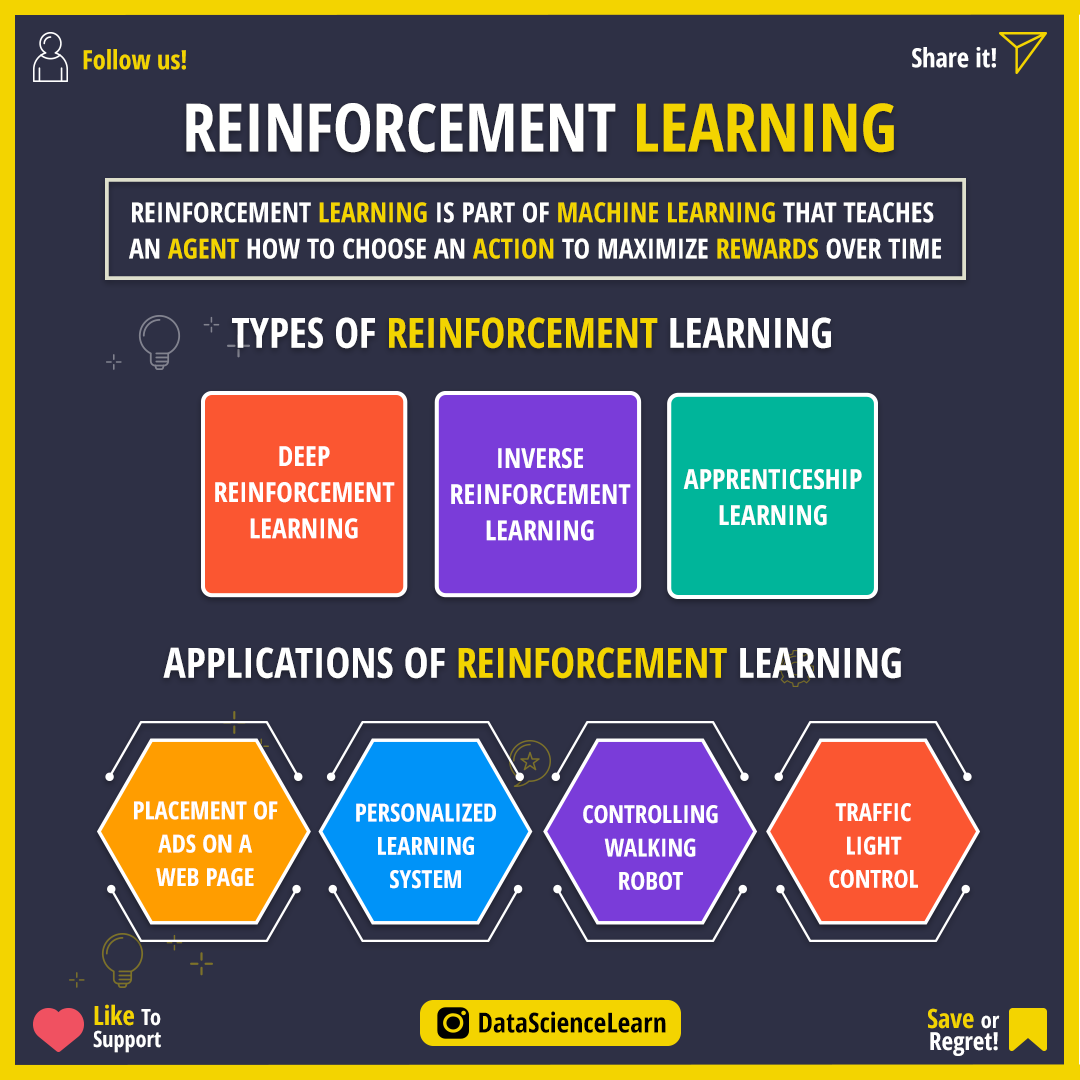
<style>
.page{position:relative;width:1080px;height:1080px;background:#2e3045}
.page>*{position:absolute;margin:0}
.t1{font:26.4px "OpenSans-CondensedBold";color:#f3d400}
.t2{font:26.4px "OpenSans-CondensedBold";color:#ffffff}
.t3{font:66.7px "OpenSans-CondensedBold";color:#fffffe}
.t4{font:66.7px "OpenSans-CondensedBold";color:#f3d400}
.t5{font:27.8px/36.1px "OpenSans-CondensedBold";color:#f3d400}
.t6{font:27.8px/36.1px "OpenSans-CondensedBold";color:#ffffff}
.t7{font:41.7px "OpenSans-CondensedBold";color:#f3d400}
.t8{font:41.7px "OpenSans-CondensedBold";color:#ffffff}
.t9{font:25px/33.3px "OpenSans-CondensedBold";color:#ffffff}
.t10{font:22.2px/22.2px "OpenSans-CondensedBold";color:#ffffff}
.t11{font:26.4px/22.2px "OpenSans-CondensedBold";color:#f3d400}
.t12{font:27.8px "OpenSans-CondensedBold";color:#000000}
.t13{font:25px/22.2px "OpenSans-CondensedBold";color:#ffffff}
</style>
<div class="page">
<p class="t1" style="left:83px;top:49px;width:103px;height:21px">Follow us!</p>
<p class="t2" style="left:912px;top:47px;width:84px;height:21px">Share it!</p>
<p class="t3" style="left:186px;top:103px;width:708px;height:50px">REINFORCEMENT <span class="t4">LEARNING</span></p>
<p class="t5" style="left:129px;top:202px;width:812px;height:57px;text-align:center"><span class="t6">REINFORCEMENT </span>LEARNING <span class="t6">IS PART OF </span>MACHINE LEARNING<span class="t6"> THAT TEACHES <br>AN </span>AGENT <span class="t6">HOW TO CHOOSE AN </span>ACTION <span class="t6">TO MAXIMIZE </span>REWARDS <span class="t6">OVER TIME</span></p>
<p class="t7" style="left:232px;top:317px;width:599px;height:32px"><span class="t8">TYPES OF </span>REINFORCEMENT <span class="t8">LEARNING</span></p>
<p class="t6" style="left:215px;top:446px;width:180px;height:93px;text-align:center">DEEP<br>REINFORCEMENT<br>LEARNING</p>
<p class="t6" style="left:451px;top:448px;width:180px;height:93px;text-align:center">INVERSE<br>REINFORCEMENT<br>LEARNING</p>
<p class="t6" style="left:683px;top:469px;width:179px;height:57px;text-align:center">APPRENTICESHIP<br>LEARNING</p>
<p class="t8" style="left:163px;top:647px;width:738px;height:32px">APPLICATIONS OF <span class="t7">REINFORCEMENT </span>LEARNING</p>
<p class="t9" style="left:134px;top:801px;width:144px;height:86px;text-align:center">PLACEMENT OF<br>ADS ON A<br>WEB PAGE</p>
<p class="t9" style="left:356px;top:803px;width:140px;height:86px;text-align:center">PERSONALIZED<br>LEARNING<br>SYSTEM</p>
<p class="t9" style="left:583px;top:805px;width:135px;height:85px;text-align:center">CONTROLLING<br>WALKING<br>ROBOT</p>
<p class="t9" style="left:829px;top:803px;width:89px;height:85px;text-align:center">TRAFFIC<br>LIGHT<br>CONTROL</p>
<p class="t10" style="left:93px;top:1004px;width:68px;height:49px"><span class="t11">Like </span>To<br>Support</p>
<p class="t12" style="left:479px;top:1011px;width:187px;height:22px">DataScienceLearn</p>
<p class="t13" style="left:928px;top:1008px;width:72px;height:48px;text-align:right"><span class="t11">Save </span><span class="t10">or<br></span>Regret!</p>
</div>
